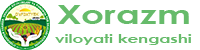
<style>
.page{position:relative;width:200px;height:50px;background:#ffffff}
.page>*{position:absolute;margin:0}
.t1{font:26.7px "CenturyGothic-Bold";color:#66bb6a;scale:1.36 1}
.t2{font:11.6px "CenturyGothic-Bold";color:#66bb6a;scale:1.45 1}
</style>
<div class="page">
<p class="t1" style="left:57px;top:5px;width:132px;height:19px">Xorazm</p>
<p class="t2" style="left:55px;top:34px;width:137px;height:11px">viloyati kengashi</p>
</div>
